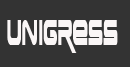
<style>
.page{position:relative;width:130px;height:67px;background:#333333}
.page>*{position:absolute;margin:0}
.t1{font:35.2px "EarthNormal";color:#faf6f6;scale:0.43 1}
</style>
<div class="page">
<p class="t1" style="left:7px;top:20px;width:111px;height:33px">UNIGRESS</p>
</div>
